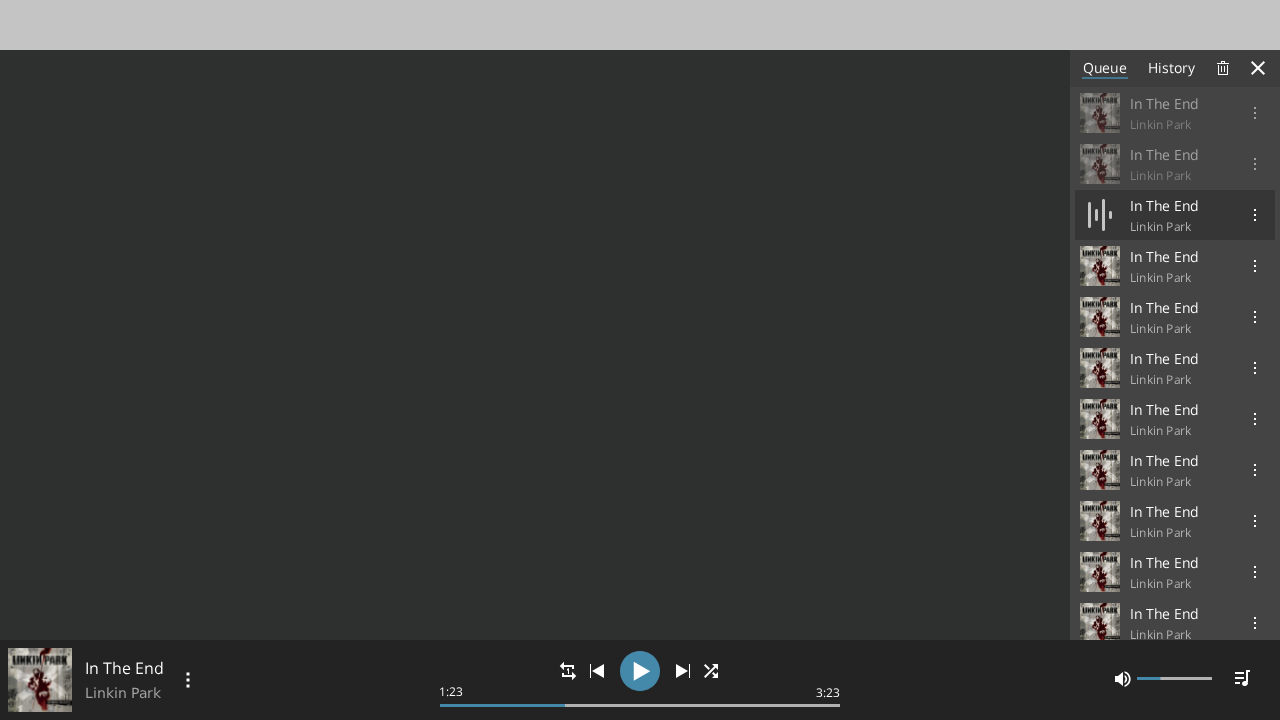
<style>
.page{position:relative;width:1280px;height:720px;background:#2e3030}
.page>*{position:absolute;margin:0}
.t1{font:14px "OpenSansRoman-Regular";color:#ffffff}
.t2{font:14px "OpenSansRoman-Regular";color:#a3a3a3}
.t3{font:12px "OpenSansRoman-Regular";color:#7b7b7b}
.t4{font:12px "OpenSansRoman-Regular";color:#b2b2b2}
.t5{font:16px "OpenSansRoman-Regular";color:#ffffff}
.t6{font:14px "OpenSans-Regular";color:#a3a3a3}
.t7{font:12px "OpenSansRoman-Regular";color:#ffffff}
</style>
<div class="page">
<p class="t1" style="left:1083px;top:62px;width:44px;height:14px">Queue</p>
<p class="t1" style="left:1149px;top:62px;width:47px;height:15px">History</p>
<p class="t2" style="left:1131px;top:98px;width:67px;height:12px">In The End</p>
<p class="t3" style="left:1131px;top:119px;width:61px;height:11px">Linkin Park</p>
<p class="t2" style="left:1131px;top:149px;width:67px;height:12px">In The End</p>
<p class="t3" style="left:1131px;top:170px;width:61px;height:11px">Linkin Park</p>
<p class="t1" style="left:1131px;top:200px;width:67px;height:12px">In The End</p>
<p class="t4" style="left:1131px;top:221px;width:61px;height:11px">Linkin Park</p>
<p class="t1" style="left:1131px;top:251px;width:67px;height:12px">In The End</p>
<p class="t4" style="left:1131px;top:272px;width:61px;height:11px">Linkin Park</p>
<p class="t1" style="left:1131px;top:302px;width:67px;height:12px">In The End</p>
<p class="t4" style="left:1131px;top:323px;width:61px;height:11px">Linkin Park</p>
<p class="t1" style="left:1131px;top:353px;width:67px;height:12px">In The End</p>
<p class="t4" style="left:1131px;top:374px;width:61px;height:11px">Linkin Park</p>
<p class="t1" style="left:1131px;top:404px;width:67px;height:12px">In The End</p>
<p class="t4" style="left:1131px;top:425px;width:61px;height:11px">Linkin Park</p>
<p class="t1" style="left:1131px;top:455px;width:67px;height:12px">In The End</p>
<p class="t4" style="left:1131px;top:476px;width:61px;height:11px">Linkin Park</p>
<p class="t1" style="left:1131px;top:506px;width:67px;height:12px">In The End</p>
<p class="t4" style="left:1131px;top:527px;width:61px;height:11px">Linkin Park</p>
<p class="t1" style="left:1131px;top:557px;width:67px;height:12px">In The End</p>
<p class="t4" style="left:1131px;top:578px;width:61px;height:11px">Linkin Park</p>
<p class="t1" style="left:1131px;top:608px;width:67px;height:12px">In The End</p>
<p class="t4" style="left:1131px;top:629px;width:61px;height:11px">Linkin Park</p>
<p class="t5" style="left:86px;top:661px;width:77px;height:14px">In The End</p>
<p class="t6" style="left:86px;top:687px;width:76px;height:12px">Linkin Park</p>
<p class="t7" style="left:440px;top:687px;width:23px;height:10px">1:23</p>
<p class="t7" style="left:816px;top:688px;width:24px;height:10px">3:23</p>
</div>
